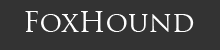
<style>
.page{position:relative;width:220px;height:50px;background:#333333}
.page>*{position:absolute;margin:0}
.t1{font:28px "TrajanPro-Regular";color:#fefefe}
</style>
<div class="page">
<p class="t1" style="left:25px;top:11px;width:169px;height:21px">FoxHound</p>
</div>
